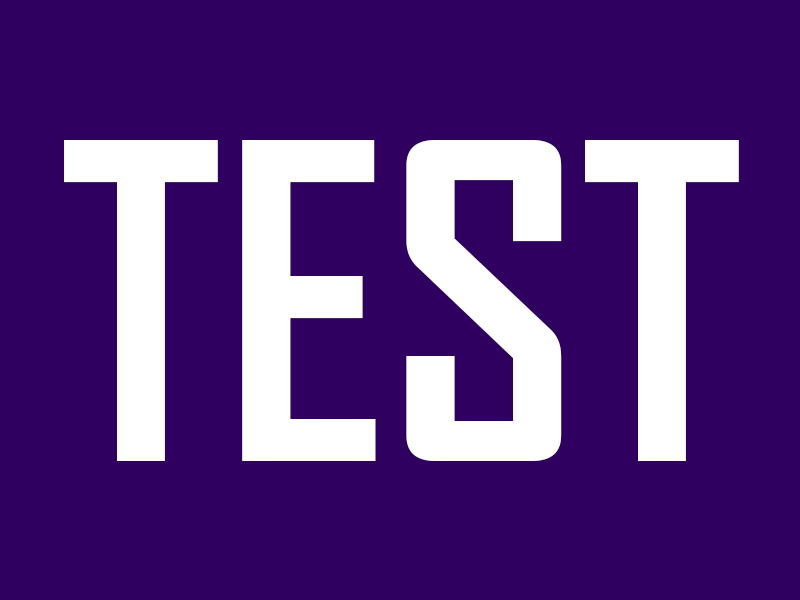
<style>
.page{position:relative;width:800px;height:600px;background:#2f0060}
.page>*{position:absolute;margin:0}
.t1{font:419.7px "AgencyFB-Bold";color:#ffffff}
</style>
<div class="page">
<p class="t1" style="left:64px;top:140px;width:675px;height:321px">TEST</p>
</div>
